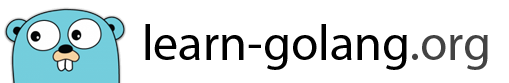
<style>
.page{position:relative;width:509px;height:83px;background:#ffffff}
.page>*{position:absolute;margin:0}
.t1{font:50px "MyriadPro-Regular";color:#000000}
.t2{font:50px "MyriadPro-Regular";color:#434343}
</style>
<div class="page">
<p class="t1" style="left:145px;top:24px;width:343px;height:46px">learn-golang<span class="t2">.org</span></p>
</div>
